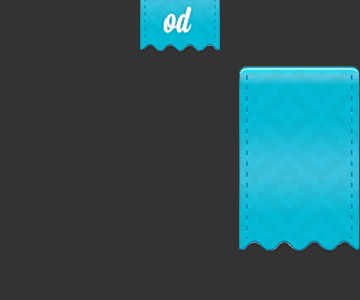
<style>
.page{position:relative;width:360px;height:300px;background:#333333}
.page>*{position:absolute;margin:0}
.t1{font:34.7px "Mission-Script";color:#ffffff}
</style>
<div class="page">
<p class="t1" style="left:164px;top:7px;width:28px;height:26px">od</p>
</div>
